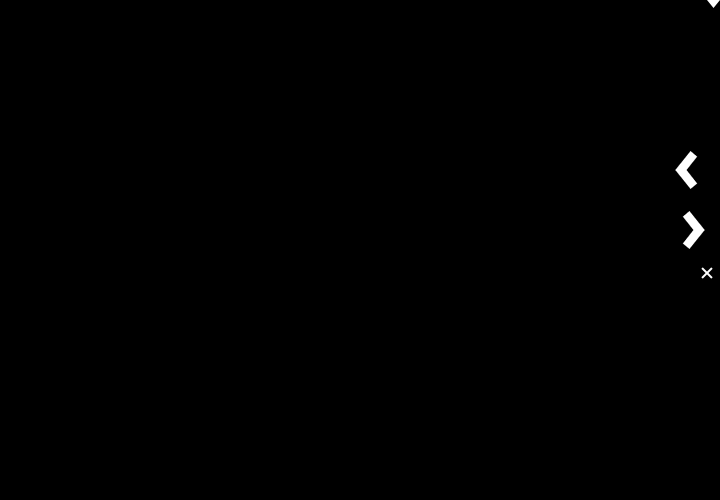
<style>
.page{position:relative;width:720px;height:500px;background:#000000}
.page>*{position:absolute;margin:0}
.t1{font:60px "MetaPro-Bold";color:#ffffff;scale:1.05 1}
</style>
<div class="page">
<p class="t1" style="left:675px;top:151px;width:23px;height:38px;rotate:180deg">&gt;</p>
<p class="t1" style="left:682px;top:211px;width:23px;height:38px">&gt;</p>
</div>
